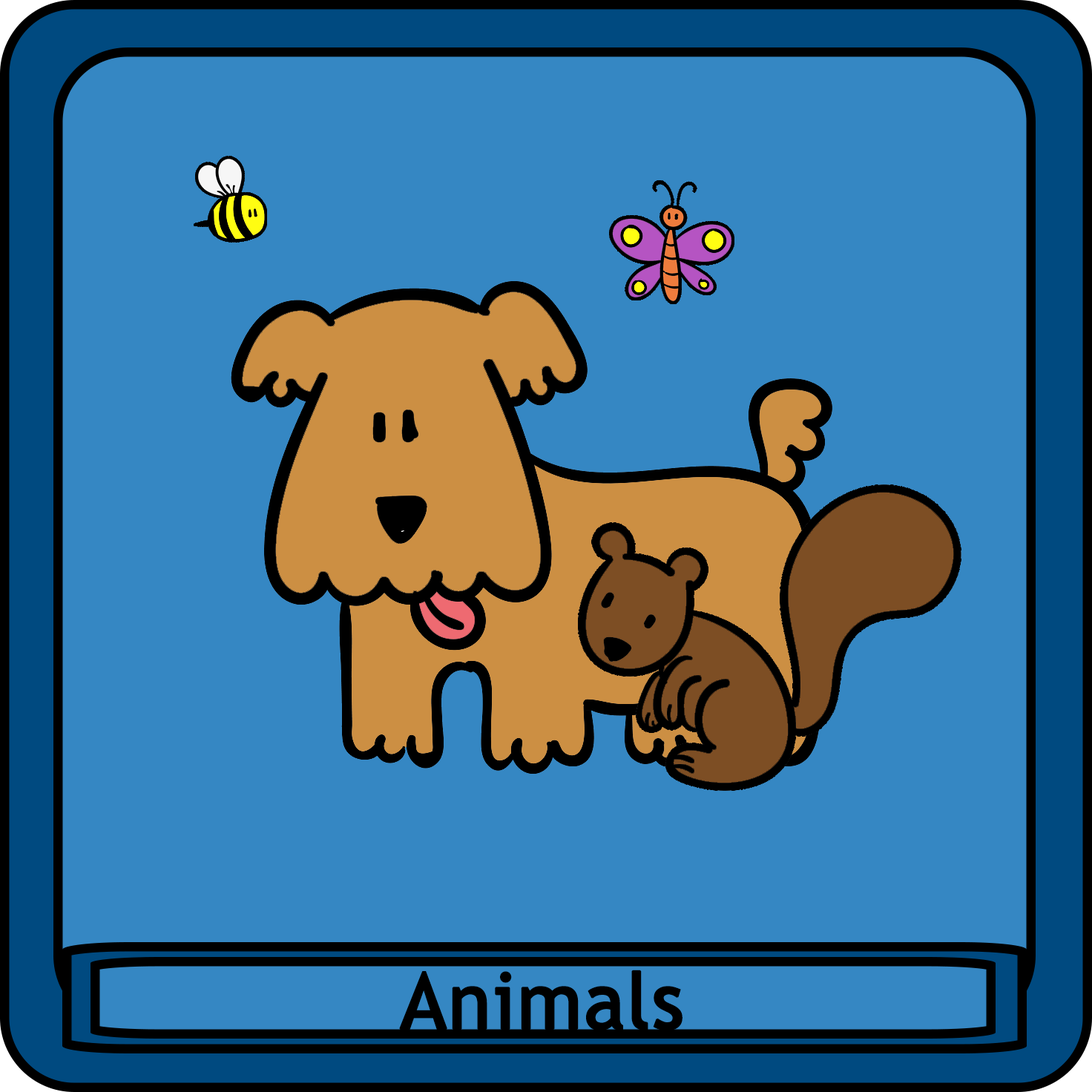
<style>
.page{position:relative;width:1092px;height:1092px;background:#3587c3}
.page>*{position:absolute;margin:0}
.t1{font:77.9px "TrebuchetMS";color:#000000;font-weight:bold}
</style>
<div class="page">
<p class="t1" style="left:399px;top:970px;width:283px;height:61px">Animals</p>
</div>
